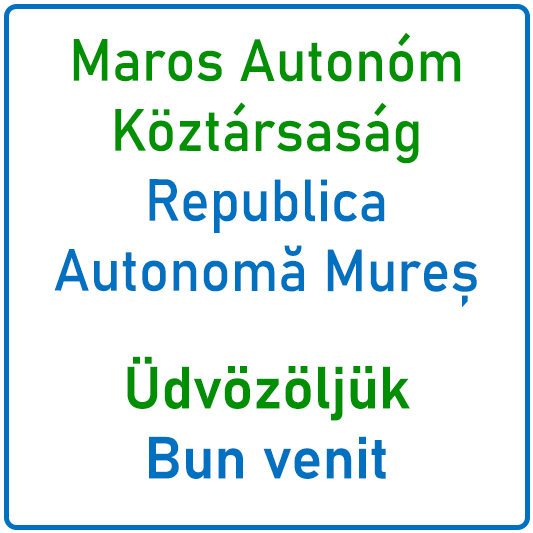
<style>
.page{position:relative;width:533px;height:533px;background:#ffffff}
.page>*{position:absolute;margin:0}
.t1{font:58.3px "Bahnschrift";color:#009002;scale:0.95 1}
.t2{font:58.3px "Bahnschrift";color:#0070c0;scale:0.95 1}
.t3{font:58.3px "Bahnschrift-SemiBold";color:#008e02}
.t4{font:58.3px "Bahnschrift-SemiBold";color:#0070c0}
</style>
<div class="page">
<p class="t1" style="left:54px;top:32px;width:423px;height:276px;text-align:center">Maros Autonóm Köztársaság<br><span class="t2">Republica Autonomă Mureș</span></p>
<p class="t3" style="left:127px;top:356px;width:283px;height:123px;text-align:center">Üdvözöljük<br><span class="t4">Bun venit</span></p>
</div>
